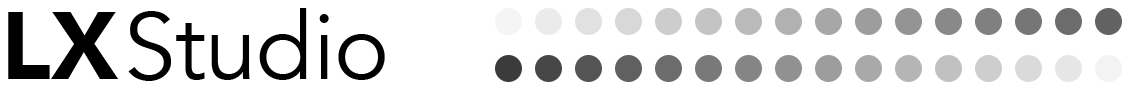
<style>
.page{position:relative;width:1140px;height:90px;background:#ffffff}
.page>*{position:absolute;margin:0}
.t1{font:93.5px "Avenir-Book";letter-spacing:-0.01em;color:#000000}
.t2{font:93.5px "Avenir-Black";letter-spacing:-0.01em;color:#000000}
</style>
<div class="page">
<p class="t1" style="left:8px;top:8px;width:377px;height:73px"><span class="t2">LX</span>Studio</p>
</div>
